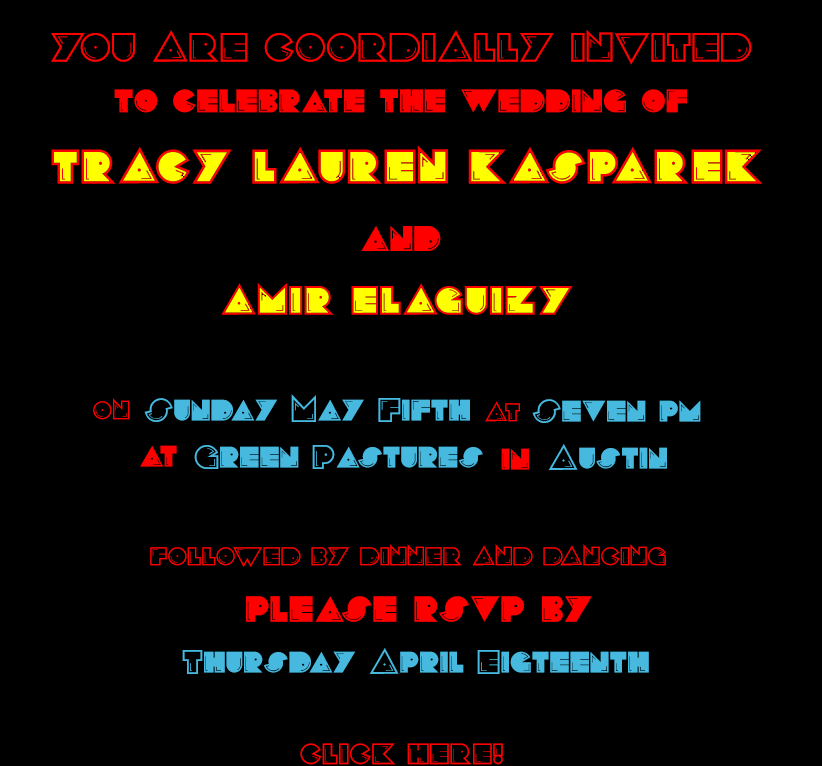
<style>
.page{position:relative;width:822px;height:766px;background:#000000}
.page>*{position:absolute;margin:0}
.t1{font:35px "PacFontGood";color:#ff0000}
.t2{font:32px "PacFontGood";color:#ff0000}
.t3{font:22px "PacFontGood";color:#ff0000}
.t4{font:29px "PacFontGood";color:#47b8de}
.t5{font:29px "PacFontGood";color:#ff0000}
.t6{font:36px "PacFontGood";color:#ff0000}
.t7{font:25px "PacFontGood";color:#ff0000}
</style>
<div class="page">
<p class="t1" style="left:51px;top:30px;width:701px;height:35px">YOU ARE COORDIALLY INVITED</p>
<p class="t2" style="left:114px;top:89px;width:573px;height:24px">to celebrate the wedding of</p>
<p class="t1" style="left:361px;top:226px;width:80px;height:25px">and</p>
<p class="t3" style="left:93px;top:398px;width:37px;height:22px">ON</p>
<p class="t4" style="left:144px;top:394px;width:326px;height:28px">Sunday May Fifth</p>
<p class="t3" style="left:485px;top:401px;width:35px;height:21px">AT</p>
<p class="t4" style="left:532px;top:399px;width:169px;height:24px">Seven pm</p>
<p class="t5" style="left:140px;top:445px;width:37px;height:22px">at</p>
<p class="t4" style="left:194px;top:445px;width:289px;height:24px">Green Pastures</p>
<p class="t5" style="left:501px;top:448px;width:28px;height:22px">in</p>
<p class="t4" style="left:548px;top:444px;width:119px;height:26px">Austin</p>
<p class="t3" style="left:150px;top:544px;width:516px;height:23px">FOLLOWED BY DINNER AND DANCING</p>
<p class="t6" style="left:246px;top:596px;width:346px;height:26px">please rsvp by</p>
<p class="t4" style="left:182px;top:648px;width:467px;height:26px">Thursday April Eigteenth</p>
<p class="t7" style="left:300px;top:743px;width:203px;height:22px">CLICK HERE!</p>
</div>
